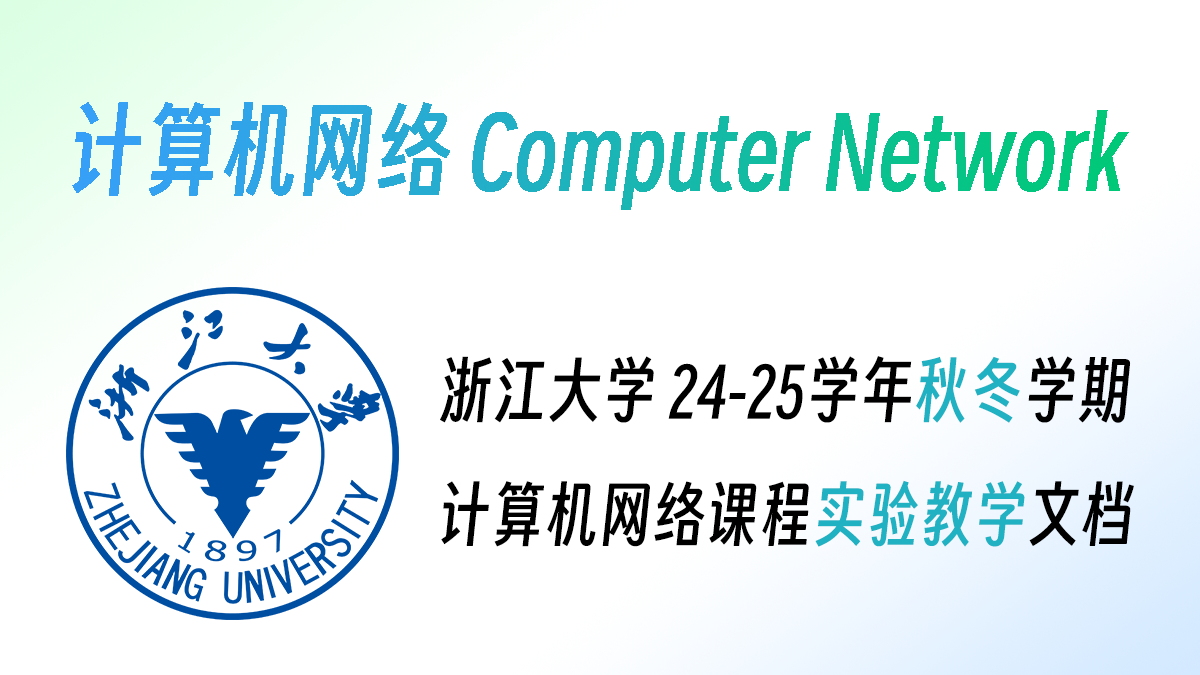
<style>
.page{position:relative;width:1200px;height:675px;background:#ffffff}
.page>*{position:absolute;margin:0}
.t1{font:68px "SmileySans-Oblique";color:#000000}
.t2{font:68px "SmileySans-Oblique";color:#20b1c2}
.t3{font:67px "SmileySans-Oblique";color:#000000}
.t4{font:67px "SmileySans-Oblique";color:#20b1c2}
</style>
<div class="page">
<p class="t1" style="left:440px;top:356px;width:691px;height:67px">浙江大学 24-25学年<span class="t2">秋冬</span>学期</p>
<p class="t3" style="left:441px;top:480px;width:693px;height:67px">计算机网络课程<span class="t4">实验教学</span>文档</p>
</div>
